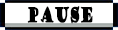
<style>
.page{position:relative;width:118px;height:30px;background:#ffffff}
.page>*{position:absolute;margin:0}
.t1{font:20px "GoudyStout";color:#000000;font-weight:bold;scale:0.56 1}
</style>
<div class="page">
<p class="t1" style="left:27px;top:6px;width:66px;height:18px">pause</p>
</div>
